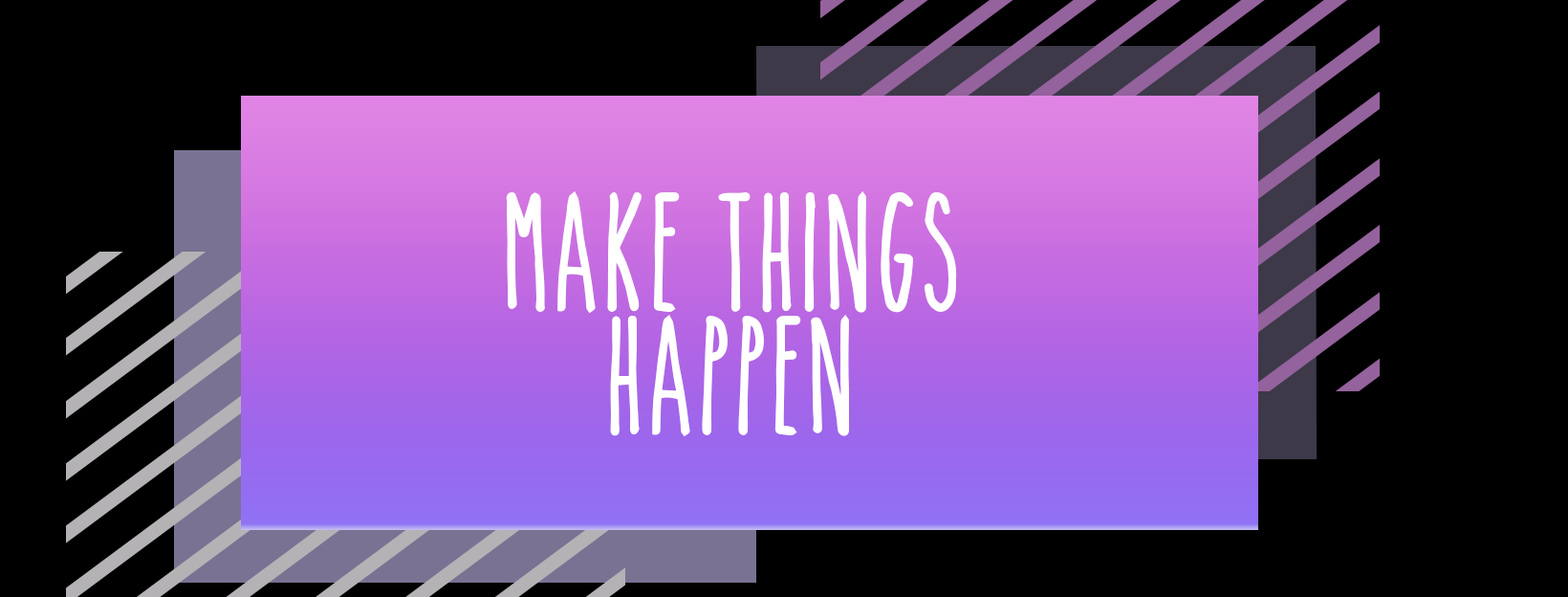
<style>
.page{position:relative;width:1568px;height:597px;background:#000000}
.page>*{position:absolute;margin:0}
.t1{font:114.7px/123.3px "TheSkinnybold";color:#ffffff}
</style>
<div class="page">
<p class="t1" style="left:506px;top:191px;width:451px;height:246px;text-align:center">Make things<br>happen</p>
</div>
